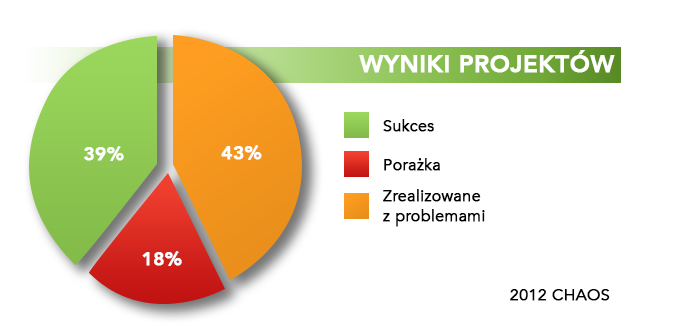
<style>
.page{position:relative;width:697px;height:335px;background:#ffffff}
.page>*{position:absolute;margin:0}
.t1{font:24px "Avenir-Heavy";color:#ffffff;text-transform:uppercase;font-weight:bold}
.t2{font:12px "Avenir-Book";color:#000000;font-weight:bold}
.t3{font:18.7px "Avenir-Heavy";color:#ffffff;font-weight:bold}
</style>
<div class="page">
<p class="t1" style="left:359px;top:50px;width:256px;height:23px">wyniki projektów</p>
<p class="t2" style="left:383px;top:119px;width:51px;height:13px">Sukces</p>
<p class="t3" style="left:84px;top:146px;width:40px;height:15px">39%</p>
<p class="t3" style="left:221px;top:145px;width:41px;height:15px">43%</p>
<p class="t2" style="left:384px;top:158px;width:56px;height:13px">Porażka</p>
<p class="t2" style="left:383px;top:189px;width:102px;height:38px">Zrealizowane <br>z problemami</p>
<p class="t3" style="left:142px;top:251px;width:40px;height:15px">18%</p>
<p class="t2" style="left:510px;top:289px;width:100px;height:12px">2012 CHAOS</p>
</div>
